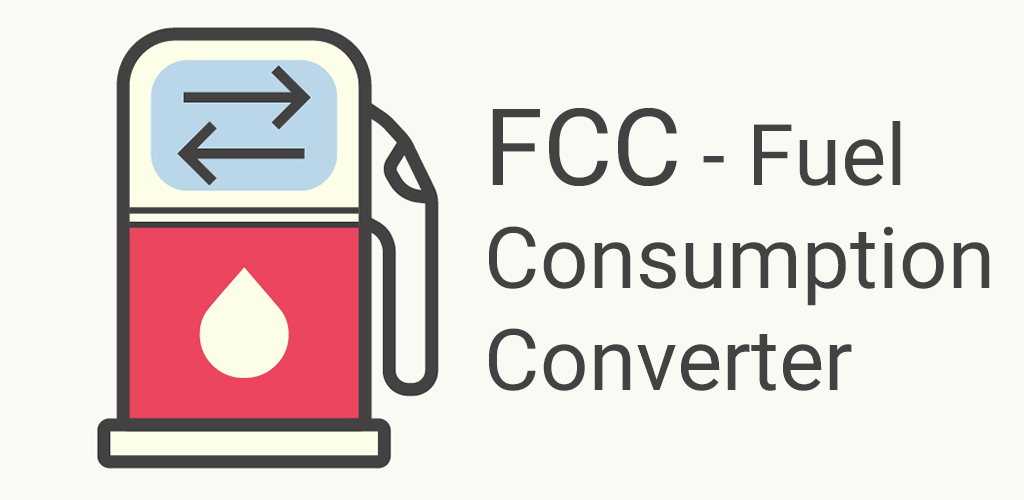
<style>
.page{position:relative;width:1024px;height:500px;background:#faf9f4}
.page>*{position:absolute;margin:0}
.t1{font:85.3px "Roboto-Regular";color:#434142}
.t2{font:106.7px "Roboto-Regular";color:#434142}
</style>
<div class="page">
<p class="t1" style="left:489px;top:108px;width:501px;height:283px"><span class="t2">FCC</span> - Fuel<br>Consumption<br>Converter</p>
</div>
